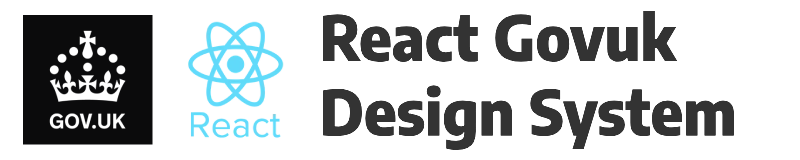
<style>
.page{position:relative;width:800px;height:160px;background:#ffffff}
.page>*{position:absolute;margin:0}
.t1{font:62px "EncodeSansSemiCondensed-ExtraBold";color:#333333}
</style>
<div class="page">
<p class="t1" style="left:323px;top:10px;width:411px;height:140px">React Govuk <br>Design System</p>
</div>
